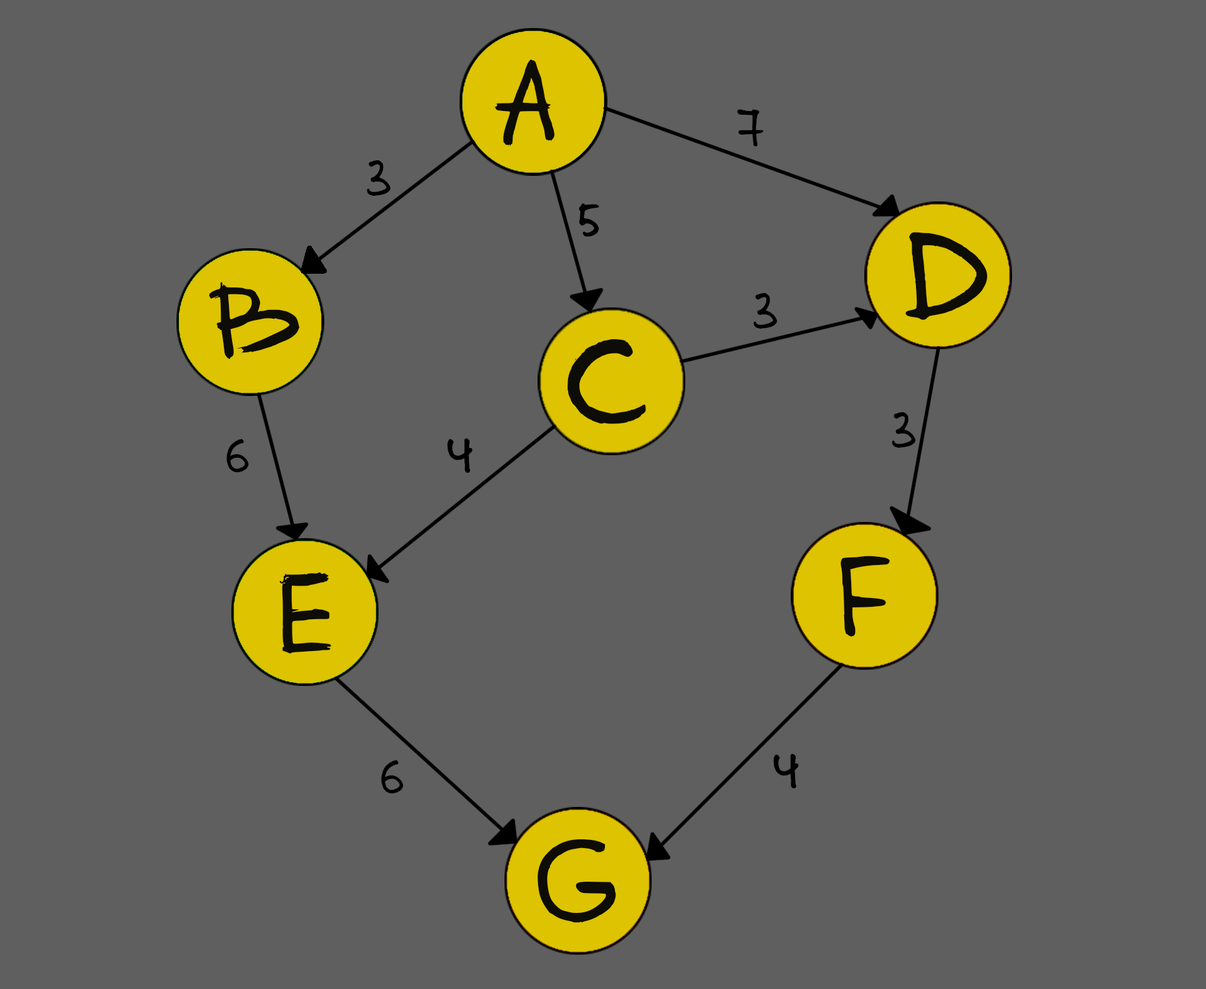
<style>
.page{position:relative;width:1206px;height:989px;background:#5f5f5f}
.page>*{position:absolute;margin:0}
.t1{font:98.2px "Solidus66_eng-Regular";color:#0d0c06}
.t2{font:39px "Solidus66_eng-Regular";color:#000000}
.t3{font:102.2px "Solidus66_eng-Regular";color:#0d0c06}
</style>
<div class="page">
<p class="t1" style="left:494px;top:59px;width:61px;height:88px">A</p>
<p class="t2" style="left:737px;top:109px;width:27px;height:38px">7</p>
<p class="t2" style="left:367px;top:160px;width:24px;height:36px">3</p>
<p class="t2" style="left:579px;top:203px;width:20px;height:34px">5</p>
<p class="t3" style="left:905px;top:232px;width:83px;height:88px">D</p>
<p class="t3" style="left:209px;top:282px;width:91px;height:77px">B</p>
<p class="t2" style="left:753px;top:292px;width:25px;height:37px">3</p>
<p class="t3" style="left:567px;top:339px;width:79px;height:85px">C</p>
<p class="t2" style="left:892px;top:412px;width:24px;height:36px">3</p>
<p class="t2" style="left:226px;top:438px;width:23px;height:35px">6</p>
<p class="t2" style="left:447px;top:438px;width:26px;height:35px">4</p>
<p class="t3" style="left:840px;top:556px;width:50px;height:81px">f</p>
<p class="t3" style="left:279px;top:572px;width:52px;height:81px">e</p>
<p class="t2" style="left:381px;top:759px;width:22px;height:35px">6</p>
<p class="t2" style="left:773px;top:754px;width:26px;height:34px">4</p>
<p class="t3" style="left:537px;top:839px;width:79px;height:84px">g</p>
</div>
